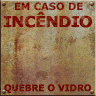
<style>
.page{position:relative;width:96px;height:96px}
.page>*{position:absolute;margin:0}
.t1{font:10px "Verdana-Bold";color:#730800}
.t2{font:15px "Verdana-Bold";letter-spacing:-0.06em;color:#730800;text-transform:uppercase;font-weight:bold;scale:1.05 1}
.t3{font:9px "Verdana-Bold";color:#730800}
</style>
<div class="page">
<p class="t1" style="left:15px;top:2px;width:68px;height:9px">EM CASO DE</p>
<p class="t2" style="left:3px;top:11px;width:89px;height:17px">INCÊNDIO</p>
<p class="t3" style="left:4px;top:84px;width:87px;height:9px">QUEBRE O VIDRO</p>
</div>
